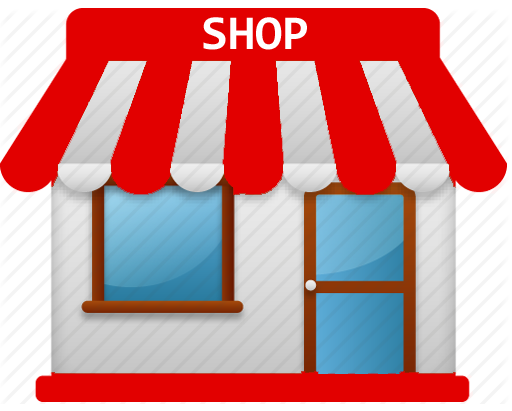
<style>
.page{position:relative;width:512px;height:411px;background:#e20000}
.page>*{position:absolute;margin:0}
.t1{font:49px "Consolas-Bold";color:#ffffff}
</style>
<div class="page">
<p class="t1" style="left:203px;top:17px;width:104px;height:33px">SHOP</p>
</div>
